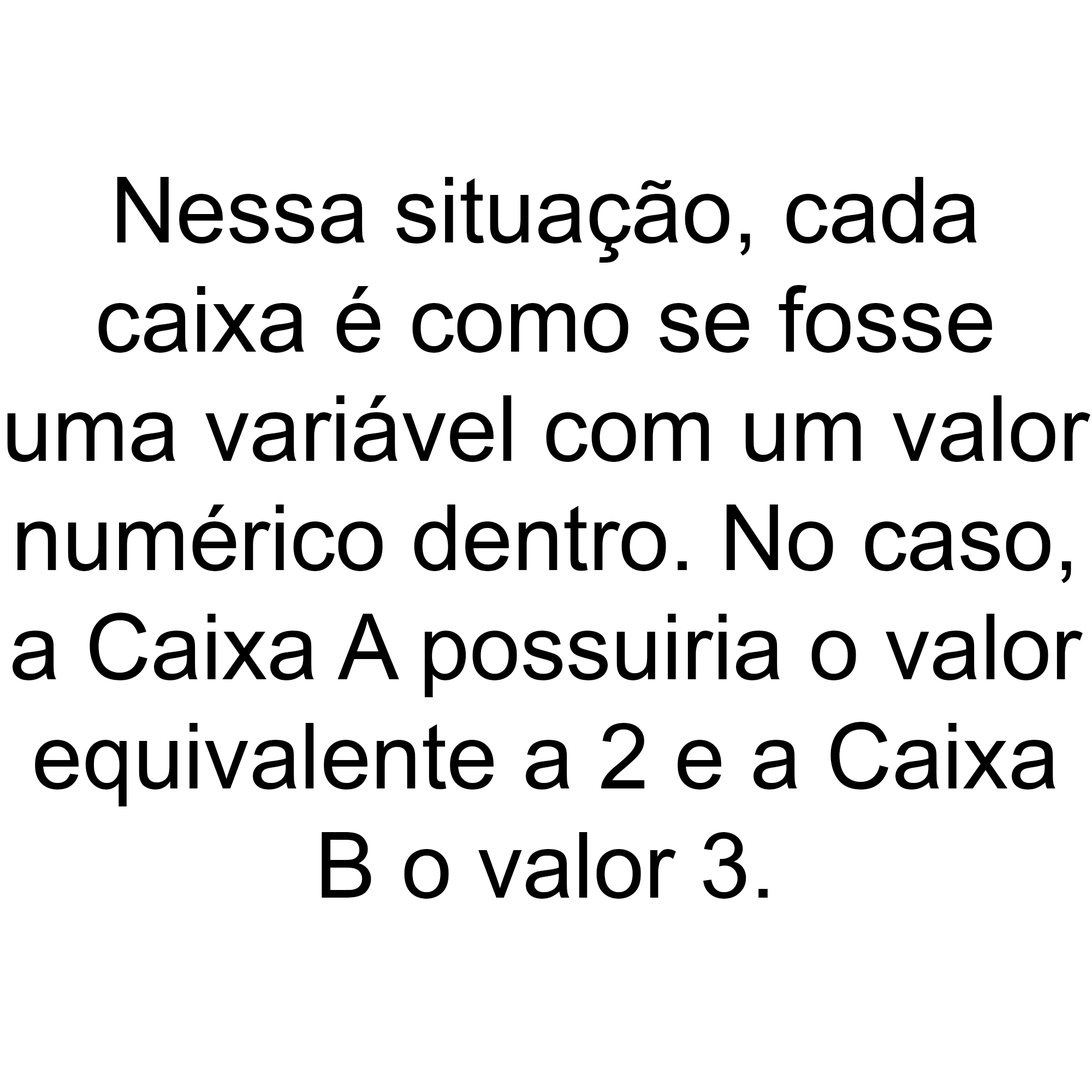
<style>
.page{position:relative;width:1092px;height:1092px;background:#ffffff}
.page>*{position:absolute;margin:0}
.t1{font:91px "ArialMT";color:#000000}
</style>
<div class="page">
<p class="t1" style="left:7px;top:177px;width:1083px;height:722px;text-align:center">Nessa situação, cada<br>caixa é como se fosse<br>uma variável com um valor<br>numérico dentro. No caso,<br>a Caixa A possuiria o valor<br>equivalente a 2 e a Caixa<br>B o valor 3.</p>
</div>
